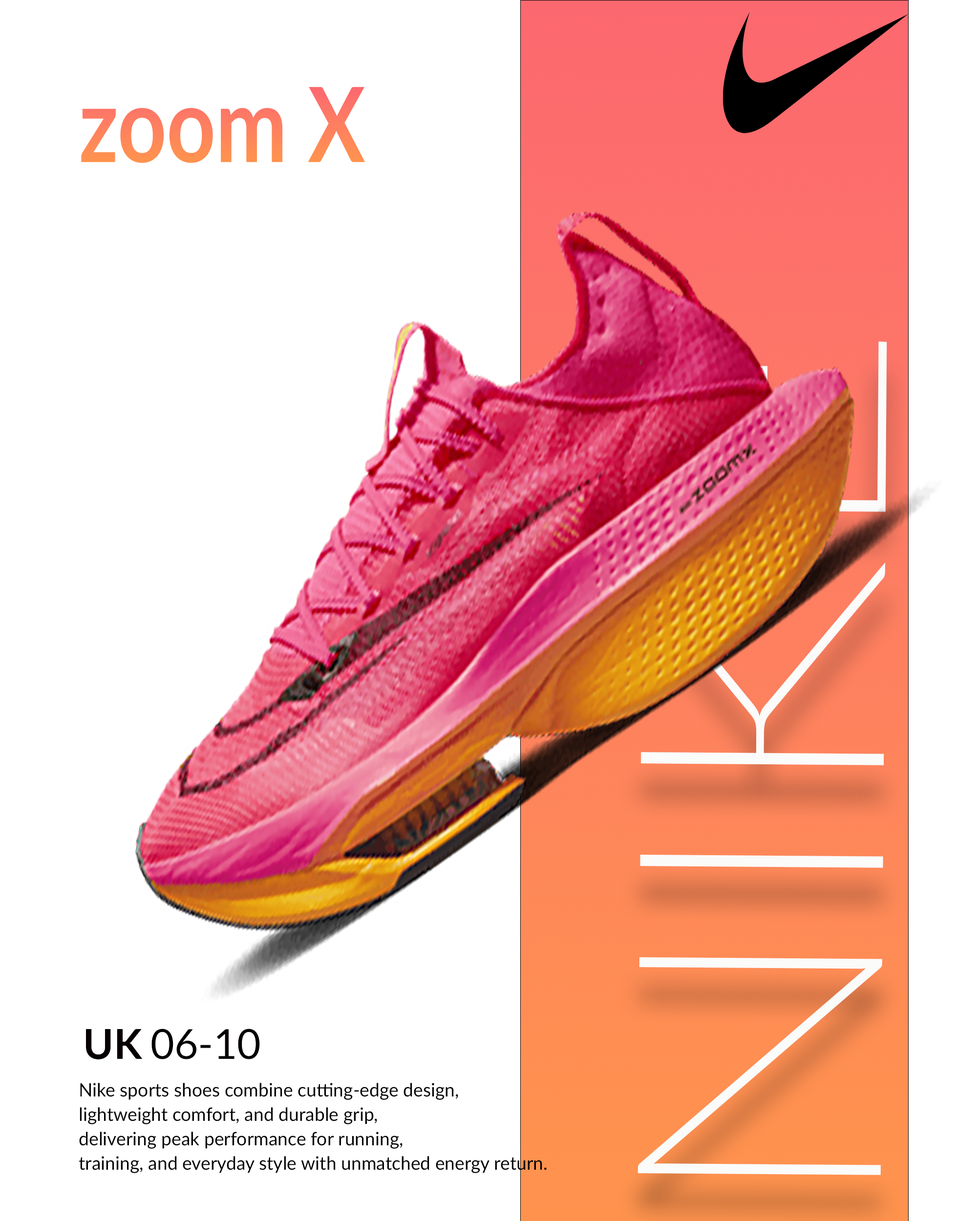
<style>
.page{position:relative;width:977px;height:1221px;background:#ffffff}
.page>*{position:absolute;margin:0}
.t1{font:592.1px "Lato-Thin";color:#fbfbfa;scale:1.18 1}
.t2{font:71.1px "Lato-Regular";color:#050000}
.t3{font:71.1px "Lato-Bold";color:#060000}
.t4{font:31.6px/24.4px "Lato-Regular";color:#030001}
</style>
<div class="page">
<p class="t1" style="left:637px;top:340px;width:250px;height:835px;rotate:-90deg">NIKE</p>
<p class="t2" style="left:86px;top:1028px;width:174px;height:31px"><span class="t3">UK </span>06-10</p>
<p class="t4" style="left:79px;top:1083px;width:467px;height:90px">Nike sports shoes combine cutting-edge design, <br>lightweight comfort, and durable grip, <br>delivering peak performance for running,<br>training, and everyday style with unmatched energy return.</p>
</div>
